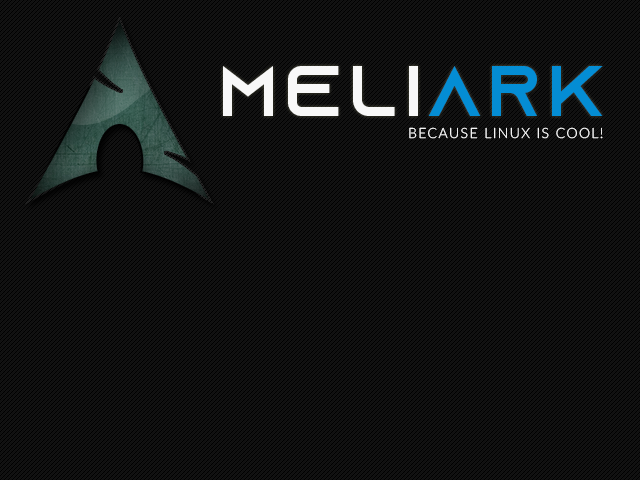
<style>
.page{position:relative;width:640px;height:480px;background:#131313}
.page>*{position:absolute;margin:0}
.t1{font:72px "AzonixRegular";letter-spacing:0.1em;color:#f8f8f8;text-transform:uppercase}
.t2{font:72px "AzonixRegular";letter-spacing:0.1em;color:#048dd4;text-transform:uppercase}
.t3{font:14px "Lato-Light";letter-spacing:0.1em;color:#ffffff;text-transform:uppercase}
</style>
<div class="page">
<p class="t1" style="left:223px;top:66px;width:380px;height:50px">Meli<span class="t2">ark</span></p>
<p class="t3" style="left:409px;top:127px;width:194px;height:12px">because linux is cool!</p>
</div>
